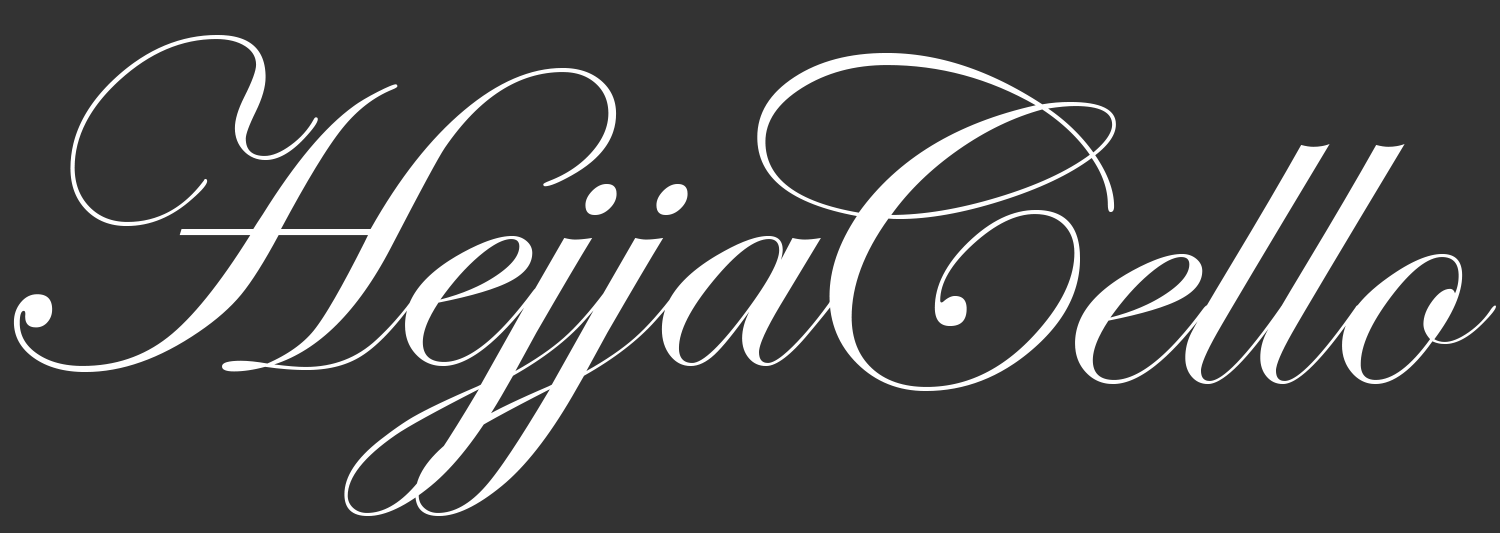
<style>
.page{position:relative;width:1500px;height:533px;background:#333333}
.page>*{position:absolute;margin:0}
.t1{font:471px "EdwardianScriptITC";color:#ffffff}
</style>
<div class="page">
<p class="t1" style="left:13px;top:35px;width:830px;height:481px">Hejja</p>
<p class="t1" style="left:757px;top:53px;width:739px;height:338px">Cello</p>
</div>
